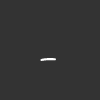
<style>
.page{position:relative;width:100px;height:100px;background:#333333}
.page>*{position:absolute;margin:0}
.t1{font:72px "AngeliqueRose-FFP";color:#ffffff}
</style>
<div class="page">
<p class="t1" style="left:40px;top:58px;width:16px;height:3px">-</p>
</div>
